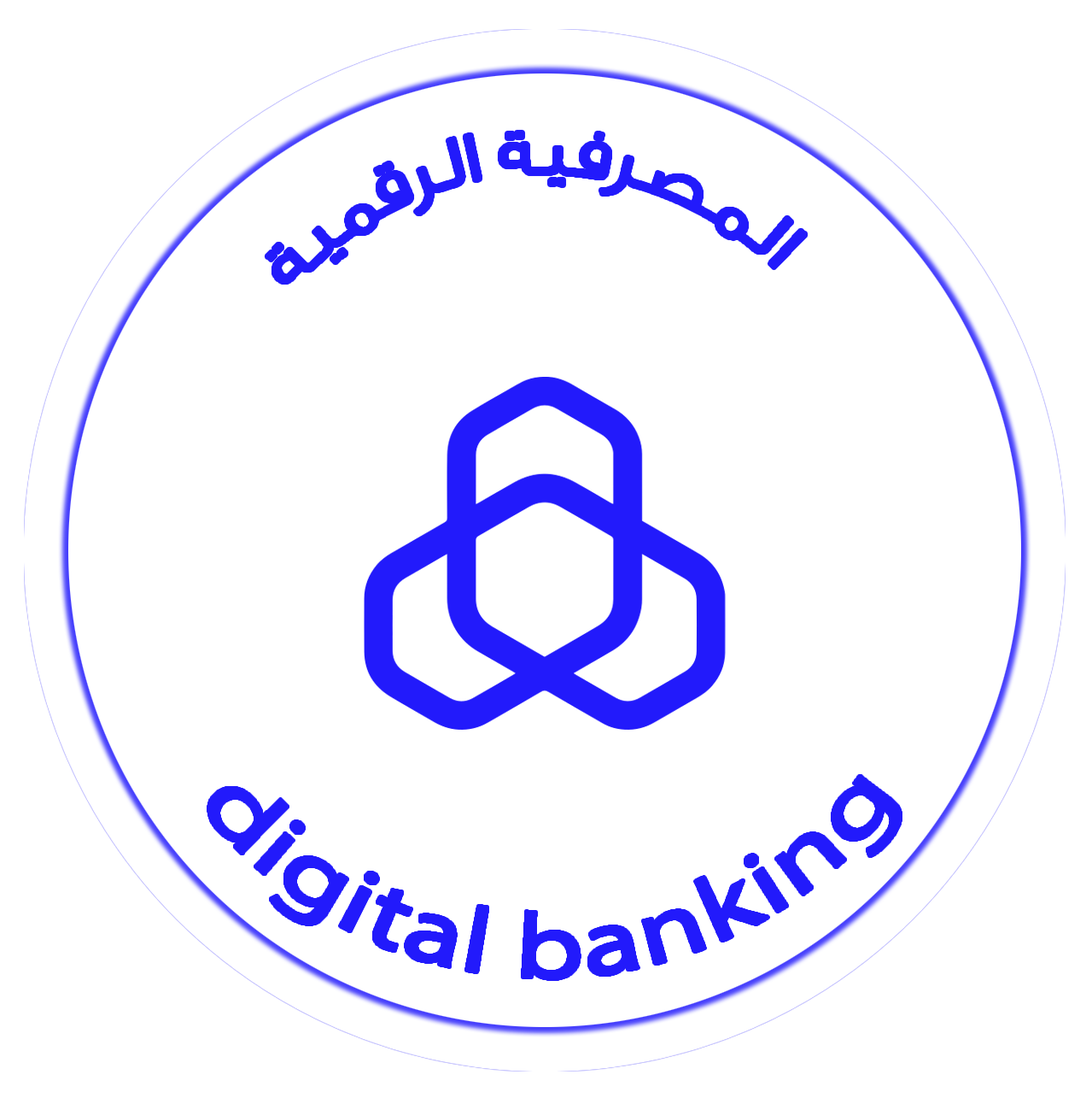
<style>
.page{position:relative;width:1086px;height:1098px;background:#ffffff}
.page>*{position:absolute;margin:0}
.t1{font:68.7px "GESSTextUltraLight-UltraLight";color:#221afb}
.t2{font:92.3px "MyriadPro-Regular";color:#221afb}
</style>
<div class="page">
<p class="t1" style="left:267px;top:132px;width:538px;height:150px;rotate:-3deg">المصرفية الرقمية</p>
<p class="t2" style="left:208px;top:776px;width:693px;height:203px;rotate:-1deg">digital banking</p>
</div>
